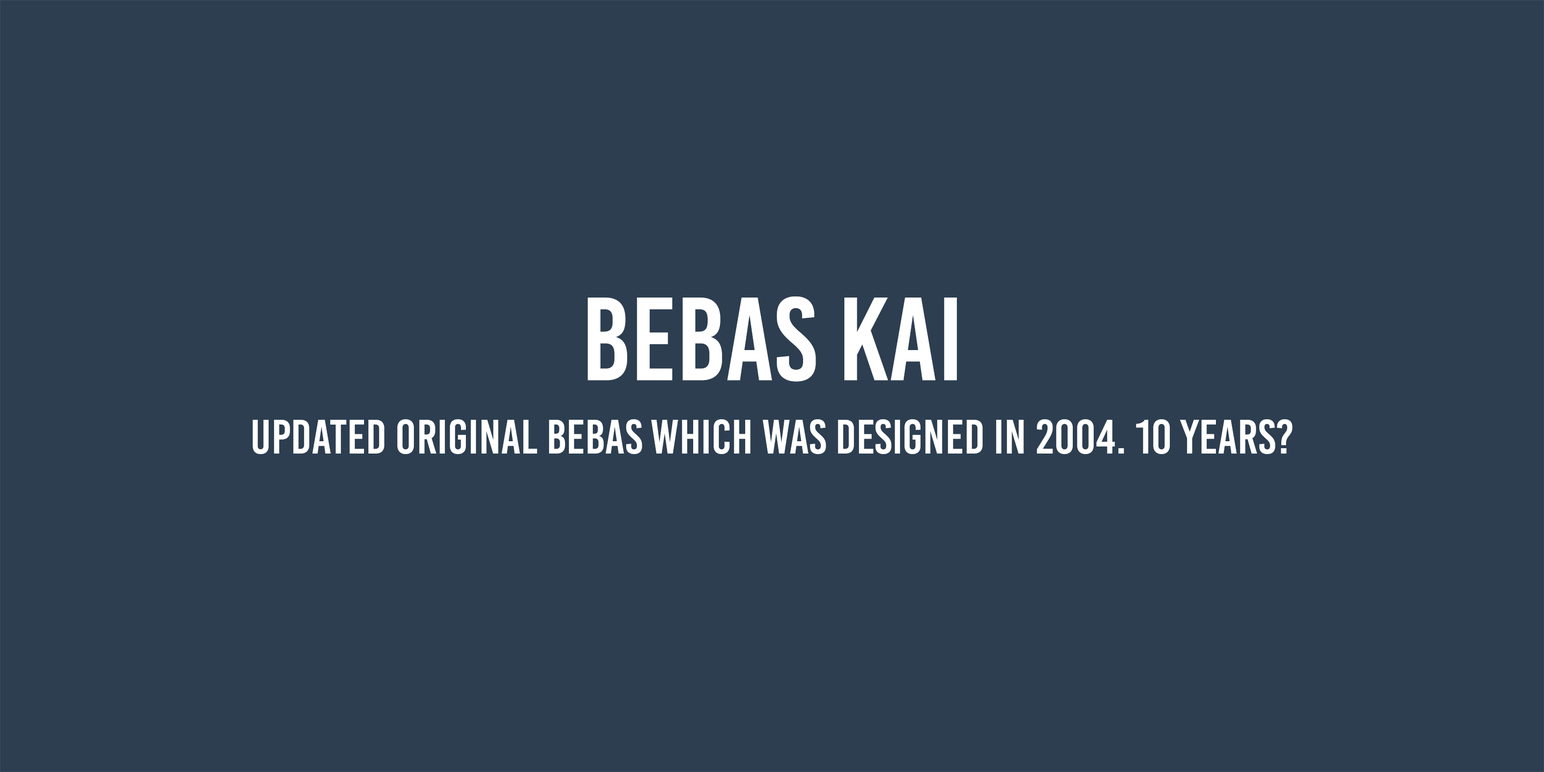
<style>
.page{position:relative;width:1544px;height:772px;background:#2c3e50}
.page>*{position:absolute;margin:0}
.t1{font:118px "BebasKai";color:#ffffff}
.t2{font:48.3px "BebasKai";color:#ffffff}
</style>
<div class="page">
<p class="t1" style="left:588px;top:297px;width:369px;height:85px">BEBAS kai</p>
<p class="t2" style="left:253px;top:419px;width:1040px;height:35px">updated original bebas which was designed in 2004. 10 years?</p>
</div>
